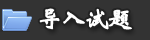
<style>
.page{position:relative;width:150px;height:40px;background:#333333}
.page>*{position:absolute;margin:0}
.t1{font:24px "STXinwei";letter-spacing:-0.05em;color:#ffffff;font-weight:bold}
</style>
<div class="page">
<p class="t1" style="left:39px;top:8px;width:93px;height:22px">导入试题</p>
</div>
